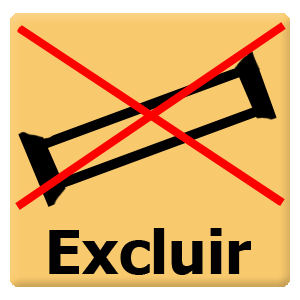
<style>
.page{position:relative;width:300px;height:300px;background:#f9ca6d}
.page>*{position:absolute;margin:0}
.t1{font:60px "Tahoma-Bold";color:#010101}
</style>
<div class="page">
<p class="t1" style="left:49px;top:228px;width:202px;height:47px">Excluir</p>
</div>
